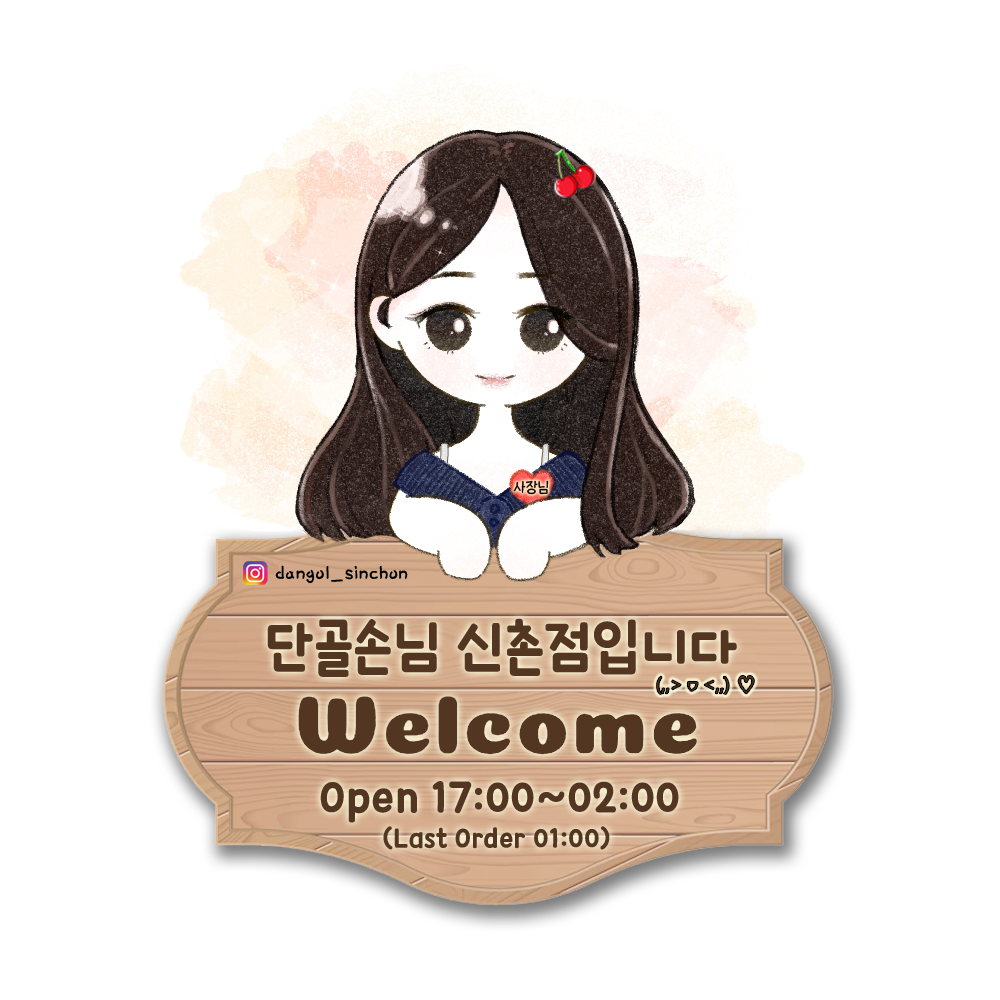
<style>
.page{position:relative;width:1000px;height:1000px;background:#ffffff}
.page>*{position:absolute;margin:0}
.t1{font:15px "THEMiss";color:#000000}
.t2{font:24px "Pix_HUFriend132";color:#000000}
.t3{font:60px "icTTHayanbunpilB";color:#533621}
.t4{font:48px "icTTHayanbunpilB";color:#533621}
.t5{font:30px "icTTHayanbunpilB";color:#533621}
</style>
<div class="page">
<p class="t1" style="left:513px;top:480px;width:36px;height:15px">사장님</p>
<p class="t2" style="left:275px;top:565px;width:133px;height:19px">dangol_sinchon</p>
<p class="t3" style="left:267px;top:618px;width:470px;height:59px">단골손님 신촌점입니다</p>
<p class="t4" style="left:320px;top:781px;width:359px;height:42px">Open 17:00~02:00</p>
<p class="t5" style="left:383px;top:826px;width:227px;height:24px">(Last Order 01:00)</p>
</div>
